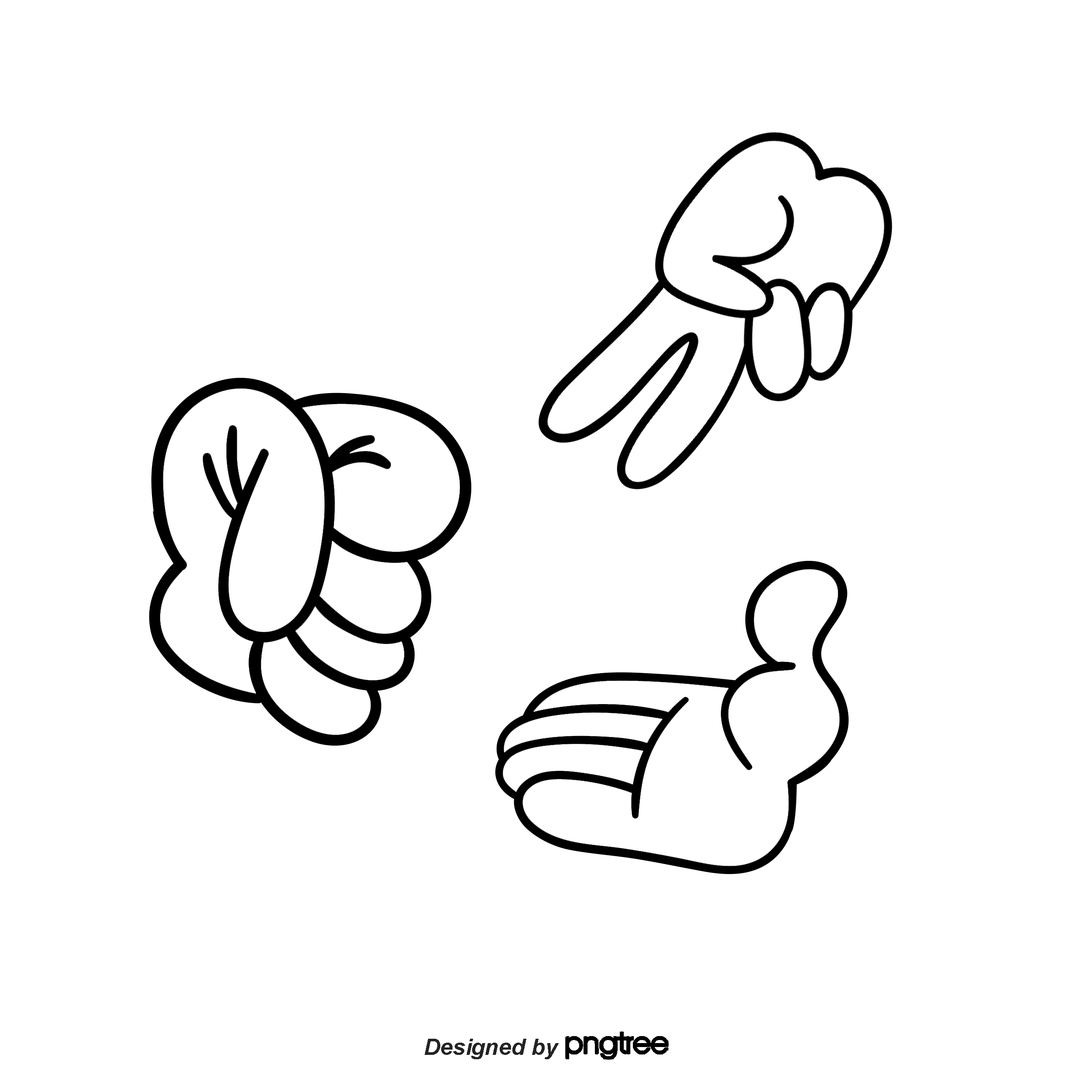
<style>
.page{position:relative;width:1092px;height:1092px;background:#ffffff}
.page>*{position:absolute;margin:0}
.t1{font:22.7px "Arial-BoldItalicMT";color:#242424}
</style>
<div class="page">
<p class="t1" style="left:425px;top:1039px;width:134px;height:20px">Designed by</p>
</div>
